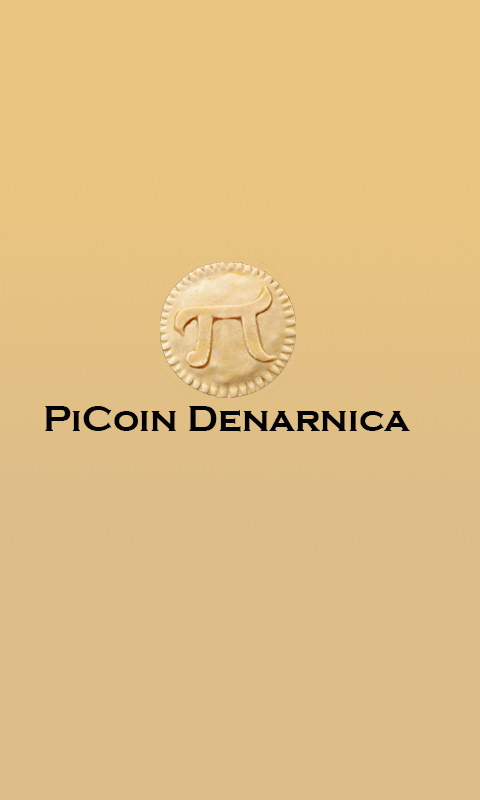
<style>
.page{position:relative;width:480px;height:800px;background:#dcbd89}
.page>*{position:absolute;margin:0}
.t1{font:37px "CopperplateGothic-Bold";color:#000000}
</style>
<div class="page">
<p class="t1" style="left:45px;top:406px;width:365px;height:26px">PiCoin Denarnica</p>
</div>
